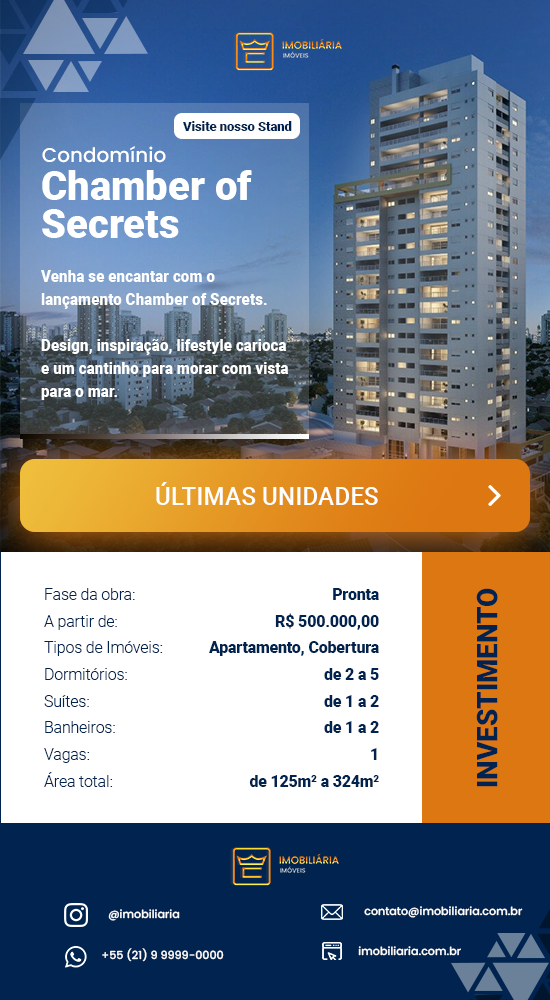
<style>
.page{position:relative;width:550px;height:1000px;background:#ffffff}
.page>*{position:absolute;margin:0}
.t1{font:13.3px "Roboto-Black";color:#00244f;scale:0.97 1}
.t2{font:20px "Poppins-Medium";color:#ffffff}
.t3{font:40px/37.5px "Roboto-Black";color:#ffffff}
.t4{font:15.6px/22.8px "Roboto-Black";color:#ffffff}
.t5{font:24.7px "Roboto-Medium";color:#ffffff}
.t6{font:15.6px/26.7px "Roboto-Light";color:#00244f}
.t7{font:15.6px/26.7px "Roboto-Black";color:#00244f}
.t8{font:28.4px "Roboto-Black";color:#00244f}
.t9{font:11.1px "Poppins-Medium";color:#ffffff}
</style>
<div class="page">
<p class="t1" style="left:183px;top:121px;width:109px;height:10px">Visite nosso Stand</p>
<p class="t2" style="left:42px;top:146px;width:124px;height:17px">Condomínio</p>
<p class="t3" style="left:42px;top:170px;width:210px;height:68px">Chamber of<br>Secrets</p>
<p class="t4" style="left:41px;top:270px;width:226px;height:39px">Venha se encantar com o <br>lançamento Chamber of Secrets.</p>
<p class="t4" style="left:41px;top:339px;width:248px;height:61px">Design, inspiração, lifestyle carioca <br>e um cantinho para morar com vista <br>para o mar.</p>
<p class="t5" style="left:156px;top:482px;width:222px;height:23px">ÚLTIMAS UNIDADES</p>
<p class="t6" style="left:44px;top:588px;width:119px;height:199px">Fase da obra:<br>A partir de:<br>Tipos de Imóveis: <br>Dormitórios: <br>Suítes: <br>Banheiros: <br>Vagas: <br>Área total:</p>
<p class="t7" style="left:209px;top:588px;width:170px;height:199px;text-align:right">Pronta<br>R$ 500.000,00<br>Apartamento, Cobertura<br>de 2 a 5<br>de 1 a 2<br> de 1 a 2<br> 1<br>de 125m² a 324m²</p>
<p class="t8" style="left:476px;top:588px;width:22px;height:199px;rotate:-90deg">INVESTIMENTO</p>
<p class="t9" style="left:108px;top:909px;width:72px;height:12px">@imobiliaria</p>
<p class="t9" style="left:364px;top:906px;width:159px;height:12px">contato@imobiliaria.com.br</p>
<p class="t9" style="left:102px;top:948px;width:122px;height:14px">+55 (21) 9 9999-0000</p>
<p class="t9" style="left:358px;top:946px;width:103px;height:10px">imobiliaria.com.br</p>
</div>
